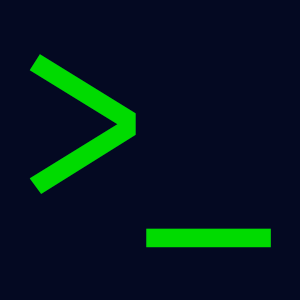
<style>
.page{position:relative;width:300px;height:300px;background:#040922}
.page>*{position:absolute;margin:0}
.t1{font:248.6px "FiraCode-Regular";color:#00db00;text-transform:uppercase}
</style>
<div class="page">
<p class="t1" style="left:29px;top:54px;width:242px;height:194px">&gt;_</p>
</div>
